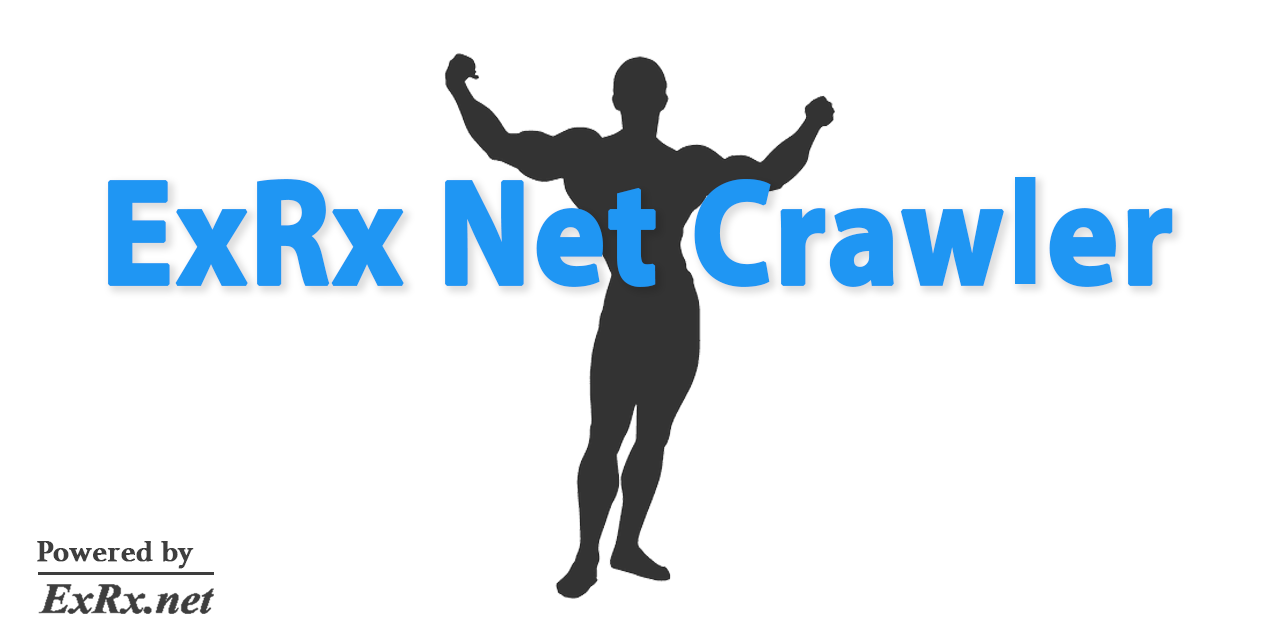
<style>
.page{position:relative;width:1280px;height:640px;background:#ffffff}
.page>*{position:absolute;margin:0}
.t1{font:151.2px "MyriadPro-Bold";color:#1f96f3;font-weight:bold;scale:0.89 1}
.t2{font:30px "Athelas-Bold";color:#3e3e3e;font-weight:bold}
</style>
<div class="page">
<p class="t1" style="left:108px;top:177px;width:1065px;height:110px">ExRx Net Crawler</p>
<p class="t2" style="left:37px;top:541px;width:157px;height:28px">Powered by</p>
</div>
